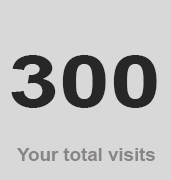
<style>
.page{position:relative;width:171px;height:180px;background:#d8d8d8}
.page>*{position:absolute;margin:0}
.t1{font:72px "Arial-BoldMT";color:#272727;scale:1.27 1}
.t2{font:18px "Arial-BoldMT";color:#888585;scale:1.04 1}
</style>
<div class="page">
<p class="t1" style="left:11px;top:55px;width:146px;height:53px">300</p>
<p class="t2" style="left:17px;top:148px;width:138px;height:13px">Your total visits</p>
</div>
